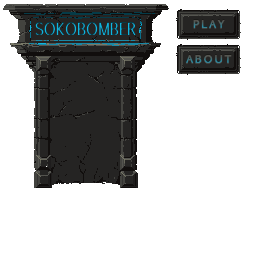
<style>
.page{position:relative;width:256px;height:256px;background:#ffffff}
.page>*{position:absolute;margin:0}
.t1{font:16.7px "EuphemiaCAS";scale:0.9 1}
.t2{font:11px "EuphemiaCAS";letter-spacing:0.16em;font-weight:bold}
</style>
<div class="page">
<p class="t1" style="left:35px;top:22px;width:101px;height:13px">SOKOBOMBER</p>
<p class="t2" style="left:193px;top:19px;width:32px;height:9px">PLAY</p>
<p class="t2" style="left:186px;top:54px;width:46px;height:9px">ABOUT</p>
</div>
